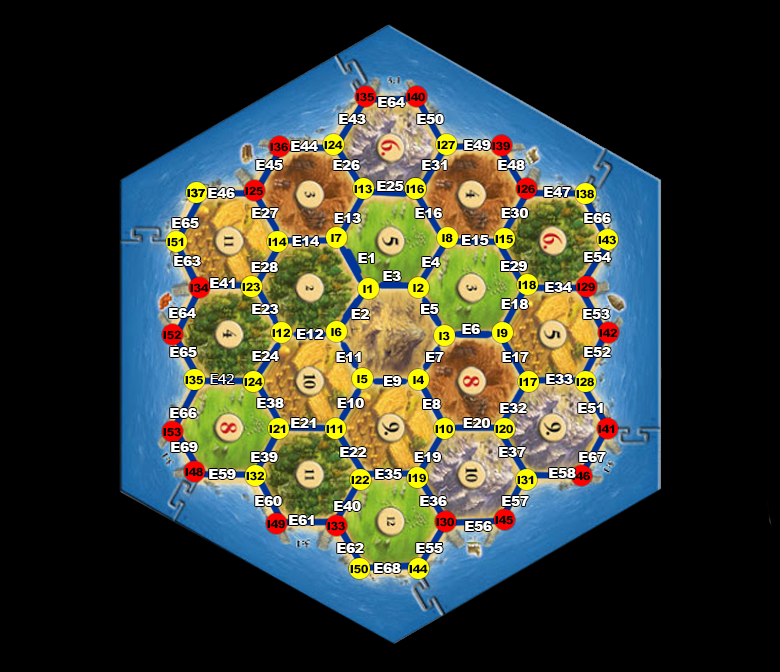
<style>
.page{position:relative;width:780px;height:672px;background:#000000}
.page>*{position:absolute;margin:0}
.t1{font:11.2px "Arial-Black";letter-spacing:-0.04em;color:#000000}
.t2{font:14px "Arial-Black";letter-spacing:-0.04em;color:#ffffff}
.t3{font:14px "Verdana";letter-spacing:-0.04em;color:#ffffff}
</style>
<div class="page">
<p class="t1" style="left:356px;top:92px;width:18px;height:10px">I35</p>
<p class="t2" style="left:378px;top:97px;width:27px;height:10px">E64</p>
<p class="t1" style="left:407px;top:92px;width:18px;height:10px">I40</p>
<p class="t2" style="left:339px;top:114px;width:27px;height:10px">E43</p>
<p class="t2" style="left:417px;top:114px;width:27px;height:10px">E50</p>
<p class="t1" style="left:270px;top:142px;width:18px;height:10px">I36</p>
<p class="t2" style="left:291px;top:141px;width:27px;height:10px">E44</p>
<p class="t1" style="left:324px;top:140px;width:19px;height:9px">I24</p>
<p class="t1" style="left:437px;top:140px;width:18px;height:9px">I27</p>
<p class="t2" style="left:464px;top:140px;width:27px;height:10px">E49</p>
<p class="t1" style="left:492px;top:141px;width:18px;height:10px">I39</p>
<p class="t2" style="left:256px;top:160px;width:27px;height:10px">E45</p>
<p class="t2" style="left:333px;top:160px;width:27px;height:10px">E26</p>
<p class="t2" style="left:422px;top:160px;width:25px;height:10px">E31</p>
<p class="t2" style="left:498px;top:160px;width:27px;height:10px">E48</p>
<p class="t1" style="left:354px;top:184px;width:18px;height:10px">I13</p>
<p class="t2" style="left:377px;top:181px;width:27px;height:10px">E25</p>
<p class="t1" style="left:406px;top:184px;width:18px;height:10px">I16</p>
<p class="t1" style="left:406px;top:184px;width:18px;height:10px">I16</p>
<p class="t1" style="left:517px;top:184px;width:18px;height:10px">I26</p>
<p class="t1" style="left:187px;top:188px;width:18px;height:10px">I37</p>
<p class="t1" style="left:187px;top:188px;width:18px;height:10px">I37</p>
<p class="t2" style="left:208px;top:188px;width:27px;height:10px">E46</p>
<p class="t1" style="left:245px;top:186px;width:18px;height:10px">I25</p>
<p class="t2" style="left:544px;top:187px;width:27px;height:10px">E47</p>
<p class="t1" style="left:576px;top:189px;width:18px;height:10px">I38</p>
<p class="t2" style="left:252px;top:208px;width:27px;height:10px">E27</p>
<p class="t2" style="left:415px;top:208px;width:27px;height:10px">E16</p>
<p class="t2" style="left:501px;top:208px;width:27px;height:10px">E30</p>
<p class="t2" style="left:172px;top:218px;width:27px;height:10px">E65</p>
<p class="t2" style="left:334px;top:213px;width:27px;height:10px">E13</p>
<p class="t2" style="left:584px;top:213px;width:27px;height:10px">E66</p>
<p class="t1" style="left:442px;top:233px;width:11px;height:10px">I8</p>
<p class="t1" style="left:167px;top:237px;width:17px;height:10px">I51</p>
<p class="t1" style="left:268px;top:237px;width:19px;height:9px">I14</p>
<p class="t2" style="left:292px;top:236px;width:27px;height:10px">E14</p>
<p class="t1" style="left:331px;top:234px;width:11px;height:8px">I7</p>
<p class="t2" style="left:462px;top:235px;width:27px;height:10px">E15</p>
<p class="t1" style="left:495px;top:234px;width:18px;height:10px">I15</p>
<p class="t1" style="left:598px;top:235px;width:18px;height:10px">I43</p>
<p class="t2" style="left:174px;top:256px;width:27px;height:10px">E63</p>
<p class="t2" style="left:358px;top:253px;width:16px;height:10px">E1</p>
<p class="t2" style="left:422px;top:257px;width:18px;height:10px">E4</p>
<p class="t2" style="left:584px;top:252px;width:27px;height:10px">E54</p>
<p class="t2" style="left:251px;top:262px;width:27px;height:10px">E28</p>
<p class="t2" style="left:501px;top:261px;width:26px;height:10px">E29</p>
<p class="t2" style="left:210px;top:278px;width:25px;height:10px">E41</p>
<p class="t2" style="left:383px;top:271px;width:18px;height:10px">E3</p>
<p class="t1" style="left:518px;top:280px;width:18px;height:10px">I18</p>
<p class="t1" style="left:190px;top:283px;width:19px;height:10px">I34</p>
<p class="t1" style="left:242px;top:282px;width:18px;height:10px">I23</p>
<p class="t1" style="left:363px;top:284px;width:9px;height:9px">I1</p>
<p class="t1" style="left:413px;top:283px;width:11px;height:9px">I2</p>
<p class="t2" style="left:545px;top:282px;width:27px;height:10px">E34</p>
<p class="t1" style="left:577px;top:282px;width:18px;height:10px">I29</p>
<p class="t2" style="left:252px;top:304px;width:27px;height:10px">E23</p>
<p class="t2" style="left:421px;top:304px;width:18px;height:10px">E5</p>
<p class="t2" style="left:501px;top:299px;width:27px;height:10px">E18</p>
<p class="t2" style="left:169px;top:308px;width:27px;height:10px">E64</p>
<p class="t2" style="left:351px;top:309px;width:18px;height:10px">E2</p>
<p class="t2" style="left:583px;top:309px;width:27px;height:10px">E53</p>
<p class="t1" style="left:272px;top:328px;width:18px;height:9px">I12</p>
<p class="t2" style="left:297px;top:329px;width:27px;height:10px">E12</p>
<p class="t1" style="left:331px;top:327px;width:11px;height:10px">I6</p>
<p class="t2" style="left:462px;top:324px;width:18px;height:10px">E6</p>
<p class="t1" style="left:497px;top:328px;width:11px;height:10px">I9</p>
<p class="t1" style="left:599px;top:328px;width:18px;height:9px">I42</p>
<p class="t1" style="left:163px;top:330px;width:18px;height:10px">I52</p>
<p class="t1" style="left:439px;top:331px;width:11px;height:10px">I3</p>
<p class="t2" style="left:170px;top:347px;width:27px;height:10px">E65</p>
<p class="t2" style="left:252px;top:351px;width:27px;height:10px">E24</p>
<p class="t2" style="left:336px;top:352px;width:25px;height:10px">E11</p>
<p class="t2" style="left:426px;top:352px;width:18px;height:10px">E7</p>
<p class="t2" style="left:502px;top:352px;width:27px;height:10px">E17</p>
<p class="t2" style="left:584px;top:347px;width:27px;height:10px">E52</p>
<p class="t1" style="left:185px;top:375px;width:18px;height:10px">I35</p>
<p class="t3" style="left:210px;top:374px;width:25px;height:10px">E42</p>
<p class="t1" style="left:244px;top:377px;width:19px;height:9px">I24</p>
<p class="t1" style="left:357px;top:375px;width:11px;height:9px">I5</p>
<p class="t2" style="left:384px;top:376px;width:18px;height:10px">E9</p>
<p class="t1" style="left:413px;top:375px;width:11px;height:9px">I4</p>
<p class="t1" style="left:519px;top:377px;width:18px;height:9px">I17</p>
<p class="t2" style="left:546px;top:374px;width:27px;height:10px">E33</p>
<p class="t1" style="left:576px;top:377px;width:18px;height:10px">I28</p>
<p class="t2" style="left:257px;top:398px;width:27px;height:10px">E38</p>
<p class="t2" style="left:337px;top:398px;width:27px;height:10px">E10</p>
<p class="t2" style="left:423px;top:399px;width:18px;height:10px">E8</p>
<p class="t2" style="left:170px;top:408px;width:27px;height:10px">E66</p>
<p class="t2" style="left:500px;top:403px;width:27px;height:10px">E32</p>
<p class="t2" style="left:578px;top:403px;width:25px;height:10px">E51</p>
<p class="t1" style="left:269px;top:424px;width:17px;height:9px">I21</p>
<p class="t2" style="left:291px;top:418px;width:25px;height:10px">E21</p>
<p class="t1" style="left:326px;top:424px;width:17px;height:9px">I11</p>
<p class="t1" style="left:435px;top:424px;width:18px;height:10px">I10</p>
<p class="t2" style="left:463px;top:418px;width:27px;height:10px">E20</p>
<p class="t1" style="left:495px;top:424px;width:18px;height:10px">I20</p>
<p class="t1" style="left:598px;top:424px;width:17px;height:9px">I41</p>
<p class="t1" style="left:163px;top:427px;width:18px;height:10px">I53</p>
<p class="t2" style="left:171px;top:442px;width:27px;height:10px">E69</p>
<p class="t2" style="left:340px;top:447px;width:27px;height:10px">E22</p>
<p class="t2" style="left:499px;top:447px;width:27px;height:10px">E37</p>
<p class="t2" style="left:251px;top:452px;width:27px;height:10px">E39</p>
<p class="t2" style="left:414px;top:452px;width:27px;height:10px">E19</p>
<p class="t2" style="left:579px;top:452px;width:27px;height:10px">E67</p>
<p class="t1" style="left:185px;top:467px;width:18px;height:10px">I48</p>
<p class="t2" style="left:209px;top:469px;width:27px;height:10px">E59</p>
<p class="t1" style="left:246px;top:471px;width:18px;height:10px">I32</p>
<p class="t2" style="left:375px;top:469px;width:27px;height:10px">E35</p>
<p class="t1" style="left:408px;top:473px;width:18px;height:10px">I19</p>
<p class="t2" style="left:549px;top:468px;width:27px;height:10px">E58</p>
<p class="t1" style="left:572px;top:471px;width:18px;height:10px">I46</p>
<p class="t1" style="left:351px;top:475px;width:18px;height:9px">I22</p>
<p class="t1" style="left:517px;top:475px;width:17px;height:10px">I31</p>
<p class="t2" style="left:255px;top:496px;width:27px;height:10px">E60</p>
<p class="t2" style="left:420px;top:496px;width:27px;height:10px">E36</p>
<p class="t2" style="left:502px;top:496px;width:27px;height:10px">E57</p>
<p class="t2" style="left:334px;top:501px;width:27px;height:10px">E40</p>
<p class="t1" style="left:267px;top:519px;width:18px;height:10px">I49</p>
<p class="t2" style="left:289px;top:515px;width:25px;height:10px">E61</p>
<p class="t1" style="left:327px;top:521px;width:18px;height:10px">I33</p>
<p class="t1" style="left:436px;top:517px;width:18px;height:10px">I30</p>
<p class="t2" style="left:465px;top:521px;width:27px;height:10px">E56</p>
<p class="t1" style="left:495px;top:515px;width:18px;height:10px">I45</p>
<p class="t2" style="left:337px;top:543px;width:27px;height:10px">E62</p>
<p class="t2" style="left:416px;top:543px;width:27px;height:10px">E55</p>
<p class="t1" style="left:350px;top:564px;width:18px;height:10px">I50</p>
<p class="t2" style="left:374px;top:563px;width:27px;height:10px">E68</p>
<p class="t1" style="left:409px;top:564px;width:19px;height:9px">I44</p>
</div>
